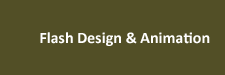
<style>
.page{position:relative;width:225px;height:75px;background:#524f26}
.page>*{position:absolute;margin:0}
.t1{font:16px "Calibri-Bold";color:#ffffff}
</style>
<div class="page">
<p class="t1" style="left:40px;top:32px;width:170px;height:14px">Flash Design &amp; Animation</p>
</div>
